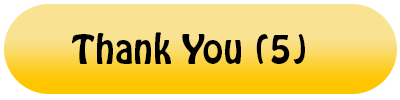
<style>
.page{position:relative;width:400px;height:100px;background:#f9e291}
.page>*{position:absolute;margin:0}
.t1{font:36px "HoboStd";color:#000000}
</style>
<div class="page">
<p class="t1" style="left:72px;top:32px;width:233px;height:32px">Thank You (5)</p>
</div>
